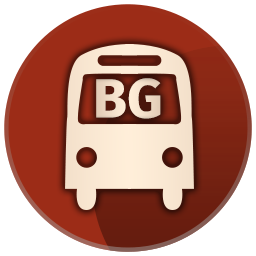
<style>
.page{position:relative;width:256px;height:256px;background:#ffffff}
.page>*{position:absolute;margin:0}
.t1{font:55px "FiraSans-Bold";color:#efdbc6}
</style>
<div class="page">
<p class="t1" style="left:96px;top:78px;width:65px;height:41px">BG</p>
</div>
